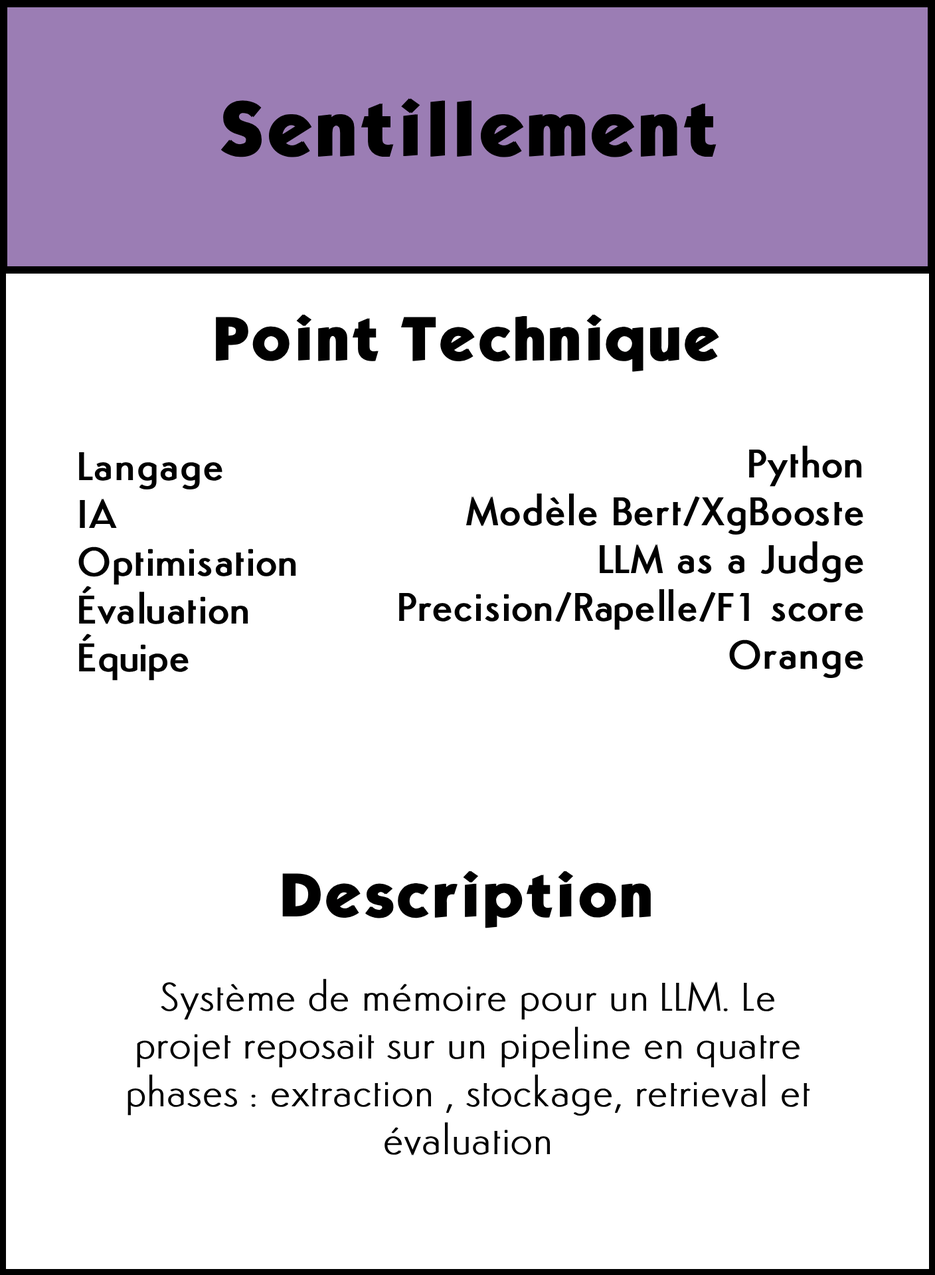
<style>
.page{position:relative;width:935px;height:1275px;background:#ffffff}
.page>*{position:absolute;margin:0}
.t1{font:66.4px "KabelBdNormal";color:#000000;font-weight:bold}
.t2{font:53.1px "KabelBdNormal";color:#000000;font-weight:bold}
.t3{font:39.8px "Semplicita-Medium";color:#000000;font-weight:bold}
.t4{font:39.8px "Semplicita-Light";color:#000000;font-weight:bold}
</style>
<div class="page">
<p class="t1" style="left:220px;top:98px;width:497px;height:59px">Sentillement</p>
<p class="t2" style="left:216px;top:314px;width:503px;height:58px">Point Technique</p>
<p class="t3" style="left:399px;top:446px;width:464px;height:232px;text-align:right">Python<br>Modèle Bert/XgBooste<br>LLM as a Judge<br>Precision/Rapelle/F1 score<br>Orange</p>
<p class="t3" style="left:78px;top:452px;width:218px;height:229px">Langage<br>IA<br>Optimisation<br>Évaluation<br>Équipe</p>
<p class="t2" style="left:282px;top:871px;width:369px;height:57px">Description</p>
<p class="t4" style="left:128px;top:979px;width:682px;height:177px;text-align:center">Système de mémoire pour un LLM. Le projet reposait sur un pipeline en quatre phases : extraction , stockage, retrieval et évaluation</p>
</div>
